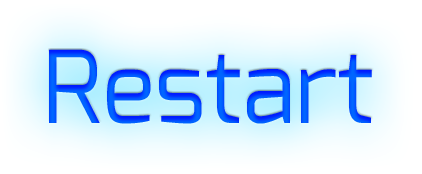
<style>
.page{position:relative;width:422px;height:174px}
.page>*{position:absolute;margin:0}
.t1{font:100px "Exo-Regular";color:#0052ff}
</style>
<div class="page">
<p class="t1" style="left:49px;top:49px;width:323px;height:75px">Restart</p>
</div>
